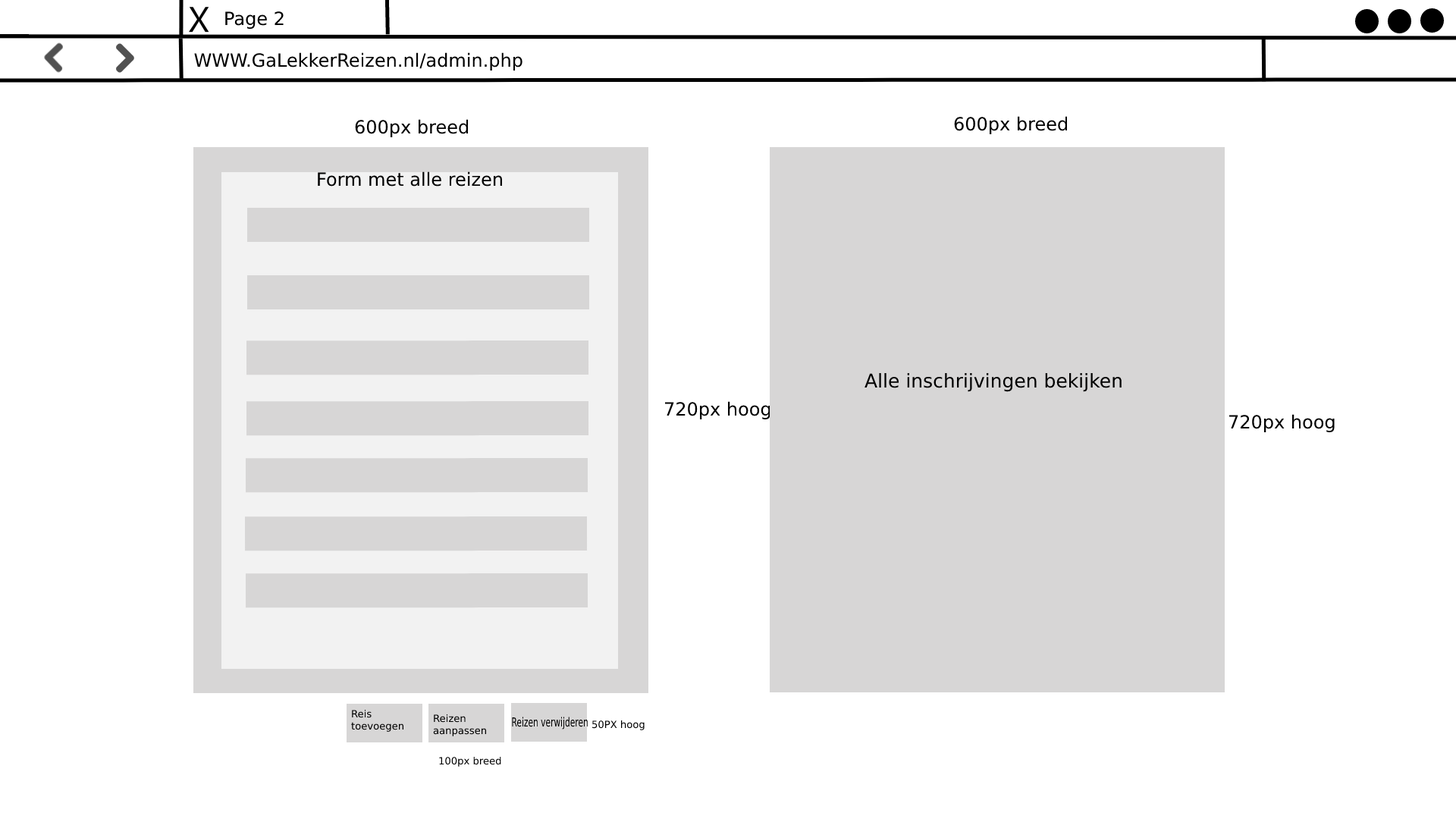
<style>
.page{position:relative;width:1456px;height:819px;background:#ffffff}
.page>*{position:absolute;margin:0}
.t1{font:18.2px "DejaVuSans";color:#000000}
.t2{font:19px "DejaVuSans";color:#000000}
.t3{font:10px "DejaVuSans";color:#000000}
.t4{font:12.4px "DejaVuSans";color:#000000;scale:0.65 1}
</style>
<div class="page">
<p class="t1" style="left:225px;top:11px;width:59px;height:18px">Page 2</p>
<p class="t1" style="left:194px;top:52px;width:328px;height:19px">WWW.GaLekkerReizen.nl/admin.php</p>
<p class="t1" style="left:355px;top:119px;width:113px;height:18px">600px breed</p>
<p class="t1" style="left:954px;top:116px;width:113px;height:18px">600px breed</p>
<p class="t1" style="left:318px;top:171px;width:185px;height:16px">Form met alle reizen</p>
<p class="t2" style="left:864px;top:373px;width:258px;height:19px">Alle inschrijvingen bekijken</p>
<p class="t1" style="left:664px;top:401px;width:106px;height:18px">720px hoog</p>
<p class="t1" style="left:1229px;top:414px;width:106px;height:18px">720px hoog</p>
<p class="t3" style="left:351px;top:710px;width:52px;height:22px">Reis <br>toevoegen</p>
<p class="t3" style="left:433px;top:714px;width:53px;height:22px">Reizen <br>aanpassen</p>
<p class="t4" style="left:512px;top:717px;width:76px;height:13px">Reizen verwijderen</p>
<p class="t3" style="left:592px;top:720px;width:53px;height:10px">50PX hoog</p>
<p class="t3" style="left:439px;top:757px;width:62px;height:10px">100px breed</p>
</div>
